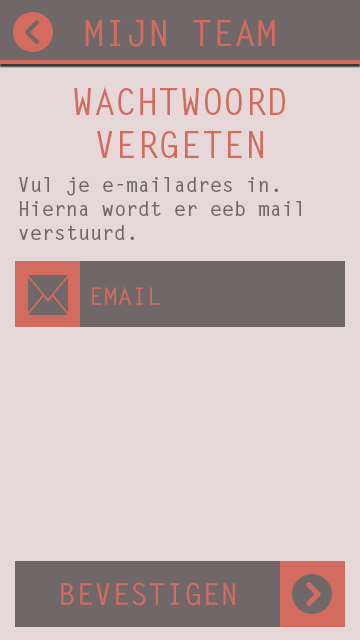
<style>
.page{position:relative;width:360px;height:640px;background:#e6d8d8}
.page>*{position:absolute;margin:0}
.t1{font:36px "LetterGothicStd-Bold";color:#d36c5e}
.t2{font:20px "LetterGothicStd-Bold";color:#706868}
.t3{font:24px "LetterGothicStd-Bold";color:#d36c5e}
.t4{font:30px "LetterGothicStd-Bold";color:#d36c5e}
</style>
<div class="page">
<p class="t1" style="left:85px;top:17px;width:190px;height:30px">MIJN TEAM</p>
<p class="t1" style="left:74px;top:86px;width:211px;height:72px">WACHTWOORD <br> VERGETEN</p>
<p class="t2" style="left:19px;top:177px;width:282px;height:63px">Vul je e-mailadres in. Hierna wordt er eeb mail verstuurd.</p>
<p class="t3" style="left:92px;top:286px;width:68px;height:19px">EMAIL</p>
<p class="t4" style="left:61px;top:582px;width:174px;height:24px">BEVESTIGEN</p>
</div>
